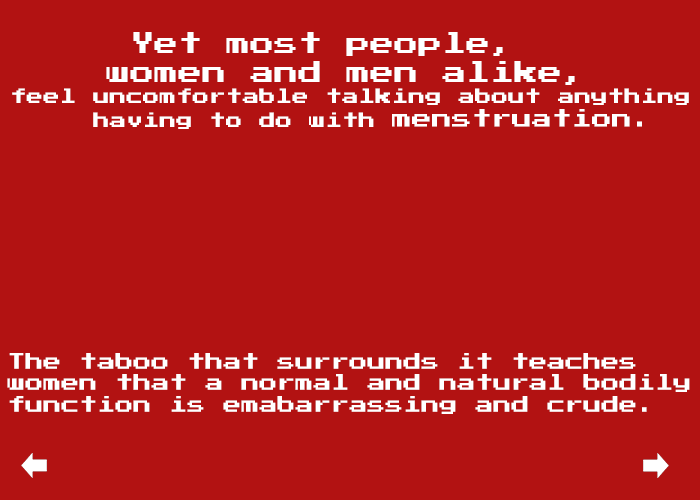
<style>
.page{position:relative;width:700px;height:500px;background:#b21212}
.page>*{position:absolute;margin:0}
.t1{font:16.6px "PressStart2P";color:#ffffff}
.t2{font:24px "PressStart2P";color:#ffffff}
.t3{font:20px "PressStart2P";color:#ffffff}
.t4{font:18px "PressStart2P";color:#ffffff}
</style>
<div class="page">
<p class="t1" style="left:12px;top:32px;width:677px;height:97px"><span class="t2">     Yet most people, <br>    women and men alike,<br></span>feel uncomfortable talking about anything<br>     having to do with <span class="t3">menstruation.</span></p>
<p class="t4" style="left:7px;top:353px;width:683px;height:61px">The taboo that surrounds it teaches<br>women that a normal and natural bodily<br>function is emabarrassing and crude.</p>
</div>
